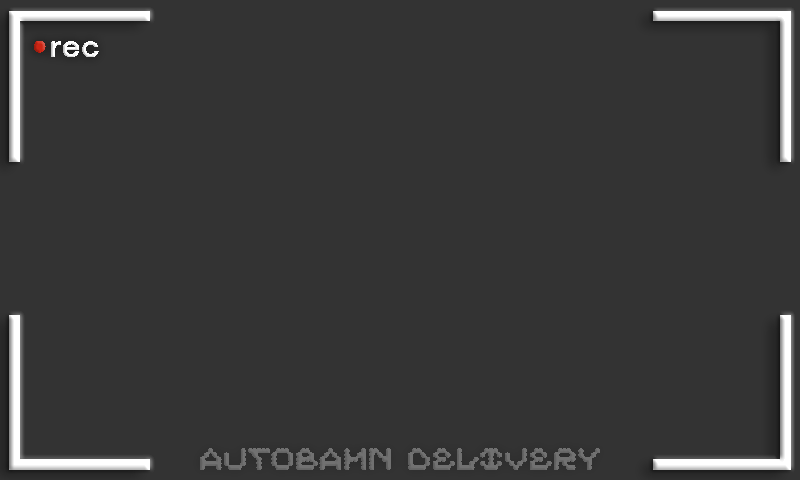
<style>
.page{position:relative;width:800px;height:480px;background:#333333}
.page>*{position:absolute;margin:0}
.t1{font:31px "NowAlt-Medium";color:#ffffff}
.t2{font:31px "NowAlt-Medium";color:#cd2514}
.t3{font:31px "ARKESDenseBold";color:#717171}
</style>
<div class="page">
<p class="t1" style="left:33px;top:40px;width:66px;height:18px"><span class="t2">•</span>rec</p>
<p class="t3" style="left:199px;top:448px;width:402px;height:23px">Autobahn Delivery</p>
</div>
